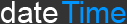
<style>
.page{position:relative;width:127px;height:24px;background:#333333}
.page>*{position:absolute;margin:0}
.t1{font:30px "ArialMT";color:#ffffff}
.t2{font:30px "ArialMT";color:#0095fe}
</style>
<div class="page">
<p class="t1" style="left:1px;top:1px;width:125px;height:22px">date <span class="t2">Time</span></p>
</div>
